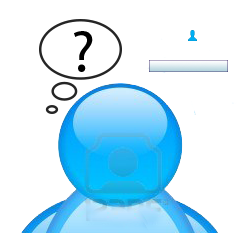
<style>
.page{position:relative;width:239px;height:233px;background:#ffffff}
.page>*{position:absolute;margin:0}
.t1{font:60px "MyriadPro-Regular";color:#000000}
</style>
<div class="page">
<p class="t1" style="left:74px;top:31px;width:19px;height:41px">?</p>
</div>
